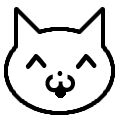
<style>
.page{position:relative;width:120px;height:120px;background:#ffffff}
.page>*{position:absolute;margin:0}
.t1{font:58.8px "ComicSansMS";letter-spacing:0.05em;color:#000000;scale:0.86 1}
.t2{font:40.5px "DINAlternate-Bold";color:#000000;scale:1.09 1}
.t3{font:37.5px "ComicSansMS";color:#000000}
</style>
<div class="page">
<p class="t1" style="left:25px;top:54px;width:72px;height:15px">^ ^</p>
<p class="t2" style="left:45px;top:74px;width:30px;height:19px;rotate:90deg">3</p>
<p class="t3" style="left:57px;top:71px;width:6px;height:5px">.</p>
</div>
